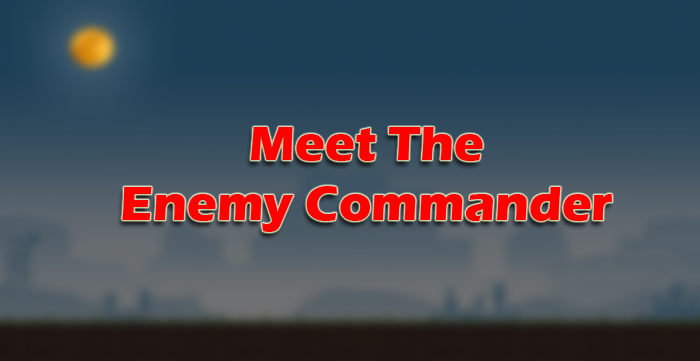
<style>
.page{position:relative;width:700px;height:361px}
.page>*{position:absolute;margin:0}
.t1{font:50px "ErasITC-Bold";color:#ff0000}
</style>
<div class="page">
<p class="t1" style="left:122px;top:127px;width:490px;height:105px;text-align:center">Meet The<br>Enemy Commander</p>
</div>
